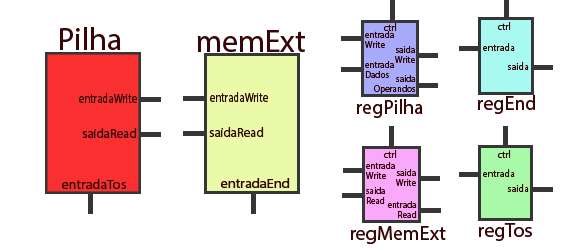
<style>
.page{position:relative;width:567px;height:248px;background:#ffffff}
.page>*{position:absolute;margin:0}
.t1{font:31.9px "MyriadHebrew-Regular";color:#370707}
.t2{font:10px "MyriadHebrew-Regular";color:#370707}
.t3{font:9px "MyriadHebrew-Regular";color:#370707}
.t4{font:13px "MyriadHebrew-Regular";color:#370707;scale:0.82 1}
.t5{font:20px "MyriadHebrew-Regular";color:#370707}
.t6{font:13px "MyriadHebrew-Regular";color:#370707}
.t7{font:13px "MyriadHebrew-Regular";color:#370707;scale:1.1 1}
</style>
<div class="page">
<p class="t1" style="left:60px;top:27px;width:61px;height:23px">Pilha</p>
<p class="t1" style="left:197px;top:30px;width:108px;height:22px">memExt</p>
<p class="t2" style="left:383px;top:23px;width:14px;height:8px">ctrl</p>
<p class="t2" style="left:497px;top:22px;width:14px;height:8px">ctrl</p>
<p class="t3" style="left:365px;top:31px;width:29px;height:17px;text-align:right">entrada<br>Write</p>
<p class="t3" style="left:395px;top:46px;width:20px;height:17px">saida<br>Write</p>
<p class="t2" style="left:483px;top:43px;width:32px;height:8px">entrada</p>
<p class="t3" style="left:365px;top:61px;width:29px;height:17px;text-align:right">entrada<br>Dados</p>
<p class="t2" style="left:507px;top:62px;width:22px;height:8px">saida</p>
<p class="t3" style="left:373px;top:75px;width:43px;height:19px">saida<br>Operandos</p>
<p class="t4" style="left:79px;top:93px;width:58px;height:10px">entradaWrite</p>
<p class="t4" style="left:210px;top:92px;width:58px;height:10px">entradaWrite</p>
<p class="t5" style="left:356px;top:99px;width:67px;height:19px">regPilha</p>
<p class="t5" style="left:477px;top:95px;width:58px;height:19px">regEnd</p>
<p class="t6" style="left:82px;top:128px;width:55px;height:10px">saidaRead</p>
<p class="t6" style="left:209px;top:127px;width:55px;height:10px">saidaRead</p>
<p class="t2" style="left:383px;top:150px;width:14px;height:8px">ctrl</p>
<p class="t2" style="left:497px;top:150px;width:14px;height:8px">ctrl</p>
<p class="t3" style="left:366px;top:162px;width:29px;height:17px;text-align:right">entrada<br>Write</p>
<p class="t3" style="left:396px;top:169px;width:20px;height:17px">saida<br>Write</p>
<p class="t2" style="left:483px;top:169px;width:32px;height:8px">entrada</p>
<p class="t7" style="left:61px;top:179px;width:66px;height:10px">entradaTos</p>
<p class="t2" style="left:507px;top:184px;width:22px;height:8px">saida</p>
<p class="t3" style="left:366px;top:187px;width:19px;height:17px;text-align:right">saida<br>Read</p>
<p class="t3" style="left:387px;top:201px;width:30px;height:17px">entrada<br>Read</p>
<p class="t5" style="left:350px;top:226px;width:96px;height:18px">regMemExt</p>
<p class="t5" style="left:478px;top:223px;width:54px;height:18px">regTos</p>
</div>
